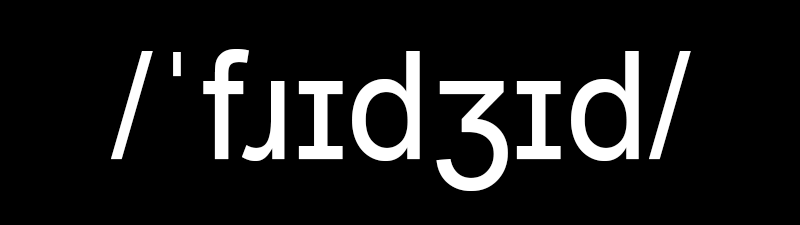
<style>
.page{position:relative;width:800px;height:225px;background:#000000}
.page>*{position:absolute;margin:0}
.t1{font:150px "ArialMT";color:#ffffff}
</style>
<div class="page">
<p class="t1" style="left:111px;top:49px;width:580px;height:142px">/ˈfɹɪdʒɪd/</p>
</div>
